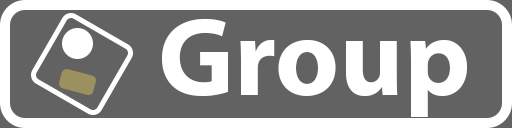
<style>
.page{position:relative;width:512px;height:128px;background:#626262}
.page>*{position:absolute;margin:0}
.t1{font:111px "MyriadPro-Bold";color:#ffffff}
</style>
<div class="page">
<p class="t1" style="left:162px;top:18px;width:305px;height:99px">Group</p>
</div>
